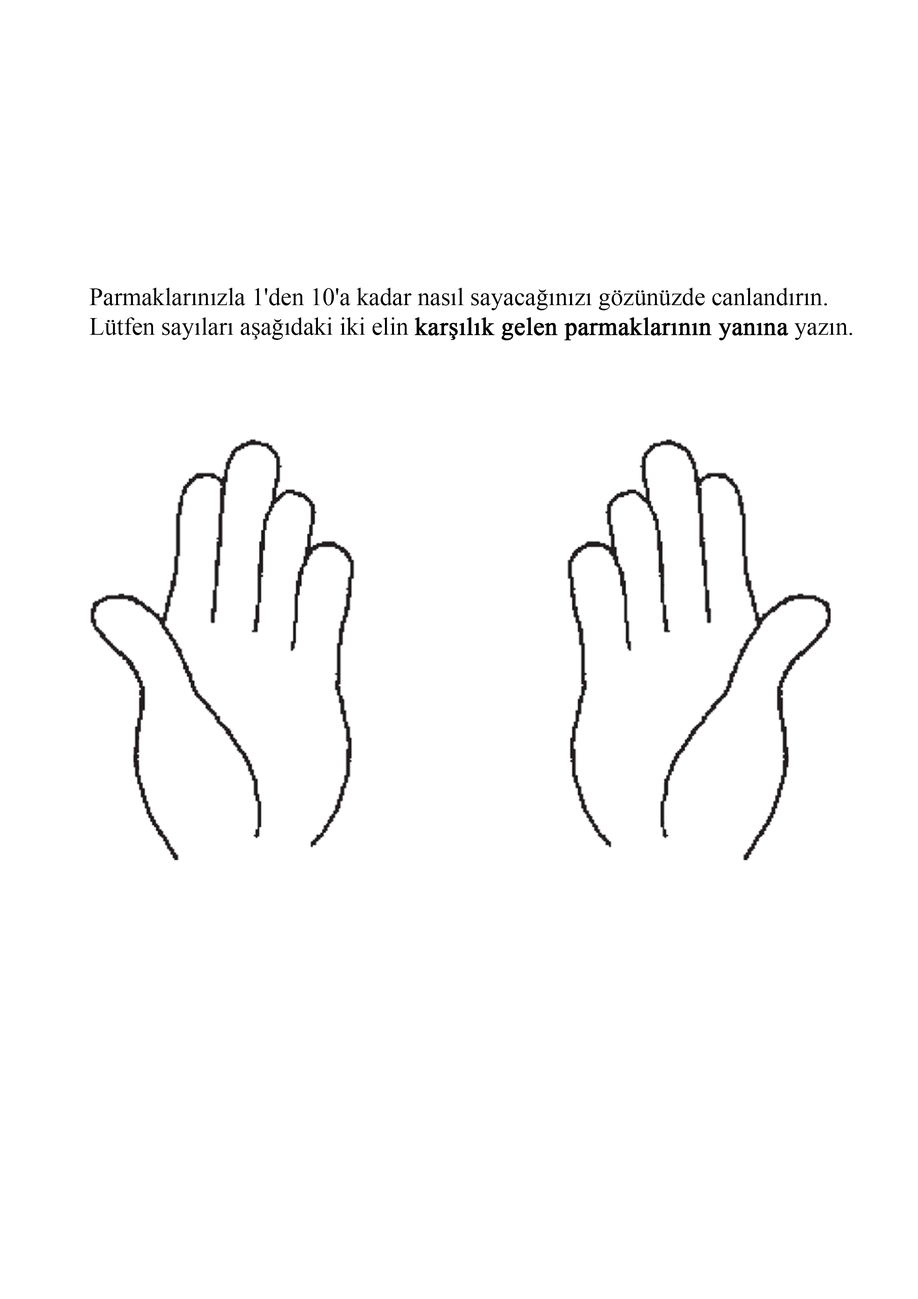
<style>
.page{position:relative;width:918px;height:1299px;background:#ffffff}
.page>*{position:absolute;margin:0}
.t1{font:24.7px "TimesNewRomanPSMT";color:#000000}
.t2{font:24.7px "TimesNewRomanPSMT";color:#000000;font-weight:bold}
</style>
<div class="page">
<p class="t1" style="left:90px;top:288px;width:762px;height:52px">Parmaklarınızla 1'den 10'a kadar nasıl sayacağınızı gözünüzde canlandırın.<br>Lütfen sayıları aşağıdaki iki elin <span class="t2">karşılık gelen parmaklarının yanına</span> yazın.</p>
</div>
